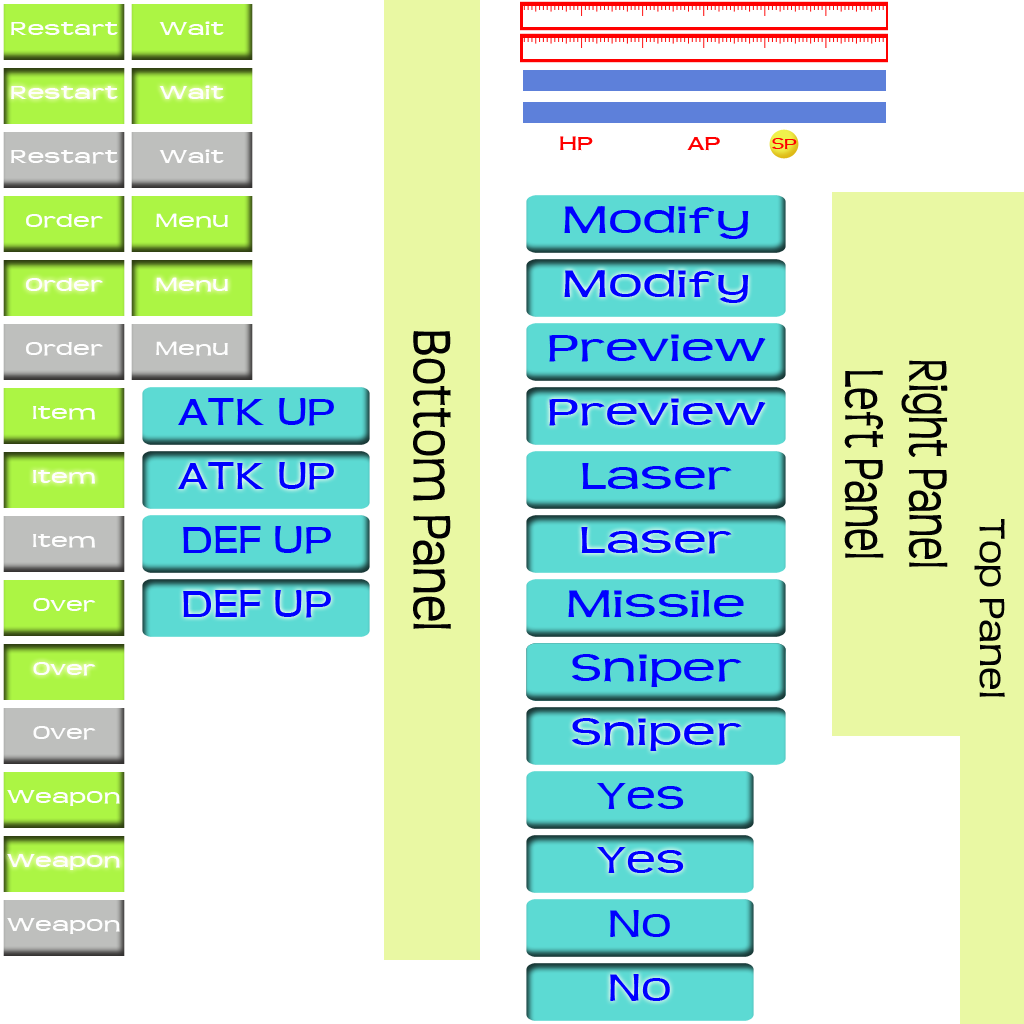
<style>
.page{position:relative;width:1024px;height:1024px;background:#ffffff}
.page>*{position:absolute;margin:0}
.t1{font:21px "Teen";color:#fefefe;scale:1.43 1}
.t2{font:21px "Teen";color:#ff0000;scale:1.43 1}
.t3{font:16.8px "Teen";color:#ff0000;scale:1.43 1}
.t4{font:42px "Teen";color:#0000ff;scale:1.43 1}
.t5{font:48.5px "Teen";color:#010101;scale:1.21 1}
.t6{font:42px "Teen";color:#010101;scale:1.43 1}
.t7{font:42px "Teen";color:#0000ff;scale:1.25 1}
.t8{font:42px "Teen";color:#010101;scale:0.93 1}
</style>
<div class="page">
<p class="t1" style="left:11px;top:22px;width:107px;height:14px">Restart</p>
<p class="t1" style="left:159px;top:21px;width:65px;height:14px">Wait</p>
<p class="t1" style="left:11px;top:86px;width:107px;height:14px">Restart</p>
<p class="t1" style="left:159px;top:85px;width:65px;height:14px">Wait</p>
<p class="t2" style="left:560px;top:136px;width:33px;height:15px">HP</p>
<p class="t2" style="left:687px;top:137px;width:33px;height:14px">AP</p>
<p class="t1" style="left:11px;top:150px;width:107px;height:14px">Restart</p>
<p class="t1" style="left:159px;top:149px;width:65px;height:14px">Wait</p>
<p class="t3" style="left:772px;top:138px;width:25px;height:12px">SP</p>
<p class="t4" style="left:564px;top:206px;width:185px;height:33px">Modify</p>
<p class="t1" style="left:26px;top:214px;width:77px;height:14px">Order</p>
<p class="t1" style="left:156px;top:213px;width:72px;height:15px">Menu</p>
<p class="t4" style="left:564px;top:270px;width:185px;height:33px">Modify</p>
<p class="t1" style="left:26px;top:278px;width:77px;height:14px">Order</p>
<p class="t1" style="left:156px;top:277px;width:72px;height:15px">Menu</p>
<p class="t1" style="left:26px;top:342px;width:77px;height:14px">Order</p>
<p class="t1" style="left:156px;top:341px;width:72px;height:15px">Menu</p>
<p class="t5" style="left:413px;top:331px;width:38px;height:298px;text-align:center">Bottom Panel</p>
<p class="t4" style="left:549px;top:334px;width:217px;height:28px">Preview</p>
<p class="t6" style="left:901px;top:360px;width:47px;height:207px;text-align:center">Right Panel</p>
<p class="t6" style="left:844px;top:370px;width:40px;height:188px;text-align:center">Left Panel</p>
<p class="t7" style="left:178px;top:398px;width:156px;height:28px">ATK UP</p>
<p class="t4" style="left:549px;top:398px;width:217px;height:28px">Preview</p>
<p class="t1" style="left:33px;top:406px;width:62px;height:14px">Item</p>
<p class="t7" style="left:178px;top:462px;width:156px;height:28px">ATK UP</p>
<p class="t1" style="left:33px;top:470px;width:62px;height:14px">Item</p>
<p class="t4" style="left:582px;top:463px;width:150px;height:27px">Laser</p>
<p class="t8" style="left:974px;top:519px;width:31px;height:178px;text-align:center">Top Panel</p>
<p class="t1" style="left:33px;top:534px;width:62px;height:14px">Item</p>
<p class="t7" style="left:183px;top:526px;width:148px;height:28px">DEF UP</p>
<p class="t4" style="left:581px;top:527px;width:151px;height:27px">Laser</p>
<p class="t7" style="left:183px;top:590px;width:148px;height:28px">DEF UP</p>
<p class="t4" style="left:568px;top:590px;width:176px;height:28px">Missile</p>
<p class="t1" style="left:33px;top:598px;width:63px;height:14px">Over</p>
<p class="t4" style="left:572px;top:654px;width:170px;height:33px">Sniper</p>
<p class="t1" style="left:33px;top:662px;width:63px;height:14px">Over</p>
<p class="t1" style="left:33px;top:726px;width:63px;height:14px">Over</p>
<p class="t4" style="left:572px;top:718px;width:170px;height:33px">Sniper</p>
<p class="t7" style="left:597px;top:783px;width:87px;height:26px">Yes</p>
<p class="t1" style="left:7px;top:790px;width:113px;height:16px">Weapon</p>
<p class="t1" style="left:7px;top:854px;width:113px;height:16px">Weapon</p>
<p class="t7" style="left:597px;top:847px;width:87px;height:26px">Yes</p>
<p class="t1" style="left:7px;top:918px;width:113px;height:16px">Weapon</p>
<p class="t7" style="left:610px;top:910px;width:60px;height:27px">No</p>
<p class="t7" style="left:610px;top:974px;width:60px;height:27px">No</p>
</div>
